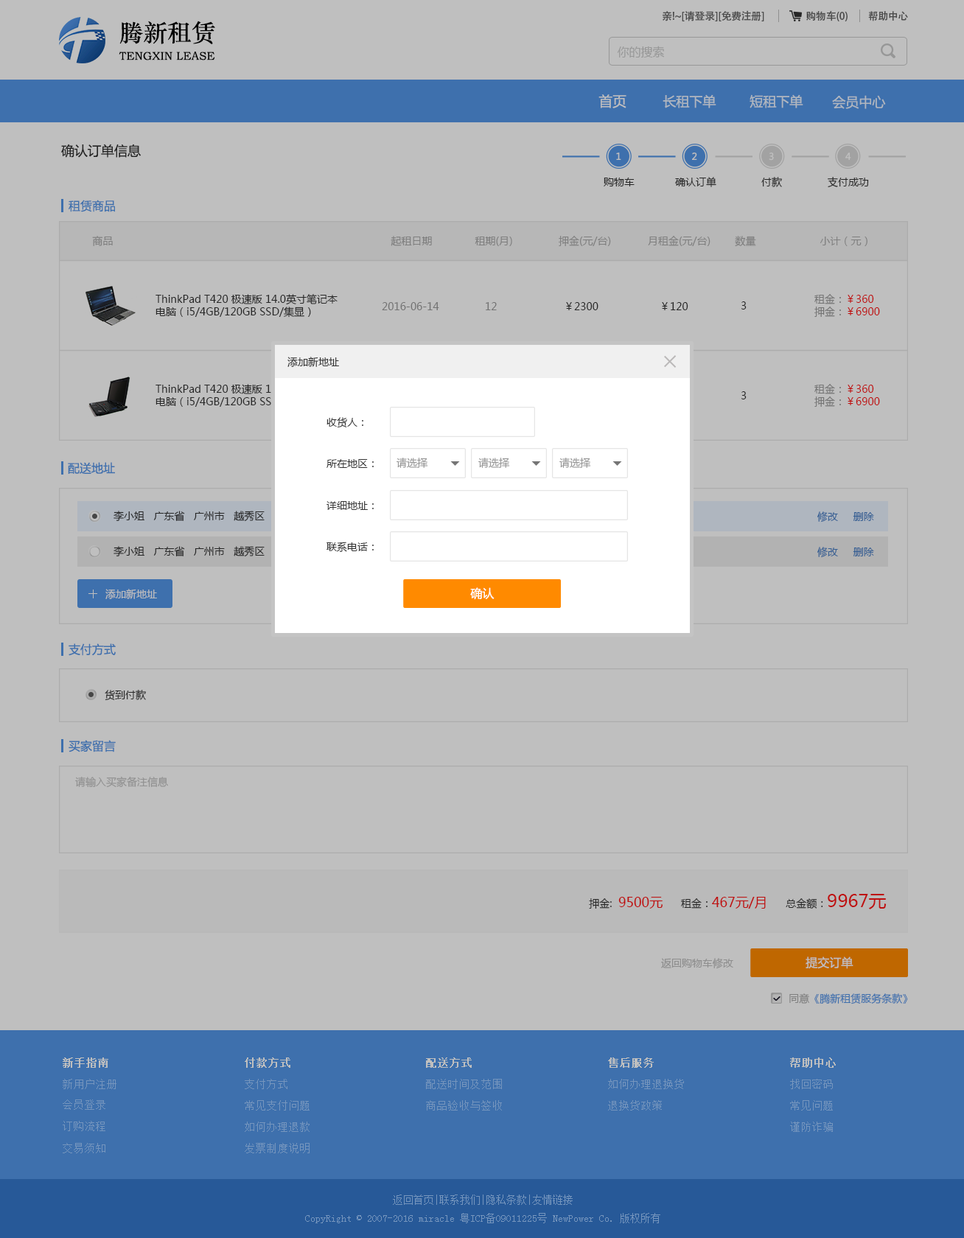
<style>
.page{position:relative;width:964px;height:1238px;background:#bfbfbf}
.page>*{position:absolute;margin:0}
.t1{font:10.3px "AdobeHeitiStd-Regular";letter-spacing:-0.02em;color:#4c4c4c}
.t2{font:24px "STZhongsong";color:#000000}
.t3{font:11.4px "STZhongsong";color:#000000}
.t4{font:11.8px "MicrosoftYaHei";color:#979797}
.t5{font:13.8px "MicrosoftYaHei";color:#bfbfbf}
.t6{font:13.3px "MicrosoftYaHei";color:#afb6bf}
.t7{font:13.3px "MicrosoftYaHei";color:#333333}
.t8{font:9.4px "MicrosoftYaHei";color:#bfbfbf}
.t9{font:10.3px "MicrosoftYaHei";color:#333333}
.t10{font:11.8px "MicrosoftYaHei";color:#3e70ad}
.t11{font:10.3px "MicrosoftYaHei";color:#7f7f7f}
.t12{font:10.3px "MicrosoftYaHei"}
.t13{font:10.3px "MicrosoftYaHei";color:#737373}
.t14{font:10.3px "MicrosoftYaHei";color:#999999}
.t15{font:10.3px "MicrosoftYaHei";color:#345e93}
.t16{font:10.3px "MicrosoftYaHei";color:#bebebe}
.t17{font:11.8px "MicrosoftYaHei";color:#fffefe}
.t18{font:10.3px "MicrosoftYaHei";color:#919191}
.t19{font:13.3px "MicrosoftYaHei";color:#be0f0f}
.t20{font:10.3px "MicrosoftYaHei";color:#be0f0f}
.t21{font:17.7px "MicrosoftYaHei";color:#be0f0f}
.t22{font:10.3px "MicrosoftYaHei";color:#8d8d8d}
.t23{font:11.8px "MicrosoftYaHei";color:#bfbebe}
.t24{font:10.3px "MicrosoftYaHei";color:#3e70ad}
.t25{font:11px "SimSun";color:#bfbfbf;font-weight:bold}
.t26{font:11px "SimSun";color:#7696be}
.t27{font:10.3px "SimSun";color:#7696be}
</style>
<div class="page">
<p class="t1" style="left:662px;top:10px;width:102px;height:11px">亲!~[请登录][免费注册]</p>
<p class="t1" style="left:806px;top:10px;width:41px;height:11px">购物车(0)</p>
<p class="t1" style="left:868px;top:11px;width:40px;height:10px">帮助中心</p>
<p class="t2" style="left:119px;top:21px;width:96px;height:23px">腾新租赁</p>
<p class="t3" style="left:119px;top:52px;width:96px;height:8px">TENGXIN LEASE</p>
<p class="t4" style="left:617px;top:46px;width:47px;height:11px">你的搜索</p>
<p class="t5" style="left:598px;top:94px;width:28px;height:14px">首页</p>
<p class="t6" style="left:662px;top:94px;width:54px;height:14px">长租下单</p>
<p class="t6" style="left:749px;top:94px;width:54px;height:14px">短租下单</p>
<p class="t6" style="left:832px;top:95px;width:53px;height:14px">会员中心</p>
<p class="t7" style="left:61px;top:144px;width:80px;height:14px">确认订单信息</p>
<p class="t8" style="left:616px;top:152px;width:5px;height:8px">1</p>
<p class="t8" style="left:692px;top:152px;width:5px;height:8px">2</p>
<p class="t8" style="left:768px;top:152px;width:5px;height:9px">3</p>
<p class="t8" style="left:845px;top:152px;width:6px;height:8px">4</p>
<p class="t9" style="left:603px;top:178px;width:31px;height:8px">购物车</p>
<p class="t9" style="left:675px;top:177px;width:41px;height:10px">确认订单</p>
<p class="t9" style="left:761px;top:177px;width:21px;height:10px">付款</p>
<p class="t9" style="left:827px;top:177px;width:42px;height:10px">支付成功</p>
<p class="t10" style="left:69px;top:200px;width:46px;height:12px">租赁商品</p>
<p class="t11" style="left:92px;top:236px;width:775px;height:11px">商品                                                                                           起租日期              租期(月)               押金(元/台)            月租金(元/台)        数量                     小计（元）</p>
<p class="t9" style="left:155px;top:294px;width:182px;height:23px">ThinkPad T420 极速版 14.0英寸笔记本<br>电脑（i5/4GB/120GB SSD/集显）</p>
<p class="t12" style="left:814px;top:294px;width:66px;height:23px">租金：￥360<br>押金：￥6900</p>
<p class="t13" style="left:382px;top:302px;width:57px;height:8px">2016-06-14</p>
<p class="t13" style="left:485px;top:302px;width:11px;height:8px">12</p>
<p class="t9" style="left:566px;top:302px;width:32px;height:8px">￥2300</p>
<p class="t9" style="left:662px;top:302px;width:26px;height:8px">￥120</p>
<p class="t9" style="left:740px;top:301px;width:6px;height:8px">3</p>
<p class="t9" style="left:287px;top:357px;width:52px;height:10px">添加新地址</p>
<p class="t9" style="left:155px;top:384px;width:182px;height:23px">ThinkPad T420 极速版 14.0英寸笔记本<br>电脑（i5/4GB/120GB SSD/集显）</p>
<p class="t12" style="left:814px;top:384px;width:66px;height:23px">租金：￥360<br>押金：￥6900</p>
<p class="t9" style="left:740px;top:391px;width:6px;height:8px">3</p>
<p class="t9" style="left:326px;top:417px;width:37px;height:11px">收货人：</p>
<p class="t10" style="left:68px;top:462px;width:47px;height:12px">配送地址</p>
<p class="t9" style="left:326px;top:459px;width:47px;height:9px">所在地区：</p>
<p class="t14" style="left:396px;top:457px;width:32px;height:11px">请选择</p>
<p class="t14" style="left:478px;top:457px;width:32px;height:11px">请选择</p>
<p class="t14" style="left:559px;top:457px;width:32px;height:11px">请选择</p>
<p class="t9" style="left:326px;top:501px;width:47px;height:9px">详细地址：</p>
<p class="t15" style="left:817px;top:511px;width:57px;height:11px">修改     删除</p>
<p class="t9" style="left:326px;top:541px;width:47px;height:11px">联系电话：</p>
<p class="t15" style="left:817px;top:547px;width:57px;height:11px">修改     删除</p>
<p class="t16" style="left:105px;top:589px;width:52px;height:10px">添加新地址</p>
<p class="t17" style="left:470px;top:587px;width:24px;height:13px">确认</p>
<p class="t10" style="left:69px;top:643px;width:47px;height:13px">支付方式</p>
<p class="t9" style="left:105px;top:689px;width:41px;height:12px">货到付款</p>
<p class="t10" style="left:69px;top:740px;width:47px;height:12px">买家留言</p>
<p class="t18" style="left:75px;top:776px;width:93px;height:11px">请输入买家备注信息</p>
<p class="t19" style="left:589px;top:894px;width:297px;height:15px"><span class="t20">  押金: </span>9500元   <span class="t20">租金：</span>467元/月   <span class="t20">总金额：</span><span class="t21">9967元</span></p>
<p class="t22" style="left:661px;top:958px;width:72px;height:11px">返回购物车修改</p>
<p class="t23" style="left:805px;top:956px;width:48px;height:13px">提交订单</p>
<p class="t24" style="left:789px;top:993px;width:119px;height:11px">同意《腾新租赁服务条款》</p>
<p class="t25" style="left:63px;top:1057px;width:45px;height:10px">新手指南</p>
<p class="t25" style="left:245px;top:1057px;width:45px;height:10px">付款方式</p>
<p class="t25" style="left:426px;top:1057px;width:45px;height:10px">配送方式</p>
<p class="t25" style="left:608px;top:1057px;width:45px;height:10px">售后服务</p>
<p class="t25" style="left:790px;top:1057px;width:45px;height:10px">帮助中心</p>
<p class="t26" style="left:63px;top:1078px;width:53px;height:11px">新用户注册</p>
<p class="t26" style="left:245px;top:1078px;width:42px;height:11px">支付方式</p>
<p class="t26" style="left:426px;top:1078px;width:76px;height:11px">配送时间及范围</p>
<p class="t26" style="left:608px;top:1078px;width:76px;height:11px">如何办理退换货</p>
<p class="t26" style="left:790px;top:1078px;width:42px;height:11px">找回密码</p>
<p class="t26" style="left:63px;top:1099px;width:42px;height:10px">会员登录</p>
<p class="t26" style="left:245px;top:1100px;width:64px;height:10px">常见支付问题</p>
<p class="t26" style="left:426px;top:1100px;width:76px;height:10px">商品验收与签收</p>
<p class="t26" style="left:608px;top:1100px;width:54px;height:10px">退换货政策</p>
<p class="t26" style="left:790px;top:1100px;width:42px;height:10px">常见问题</p>
<p class="t26" style="left:63px;top:1120px;width:42px;height:11px">订购流程</p>
<p class="t26" style="left:245px;top:1121px;width:64px;height:10px">如何办理退款</p>
<p class="t26" style="left:790px;top:1121px;width:42px;height:10px">谨防诈骗</p>
<p class="t26" style="left:63px;top:1143px;width:42px;height:10px">交易须知</p>
<p class="t26" style="left:245px;top:1143px;width:64px;height:10px">发票制度说明</p>
<p class="t27" style="left:305px;top:1194px;width:355px;height:29px;text-align:center">返回首页|联系我们|隐私条款|友情链接<br>CopyRight © 2007-2016 miracle 粤ICP备09011225号 NewPower Co. 版权所有</p>
</div>
